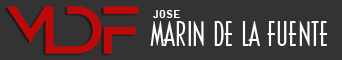
<style>
.page{position:relative;width:342px;height:60px;background:#333333}
.page>*{position:absolute;margin:0}
.t1{font:11.1px "BellGothicBT-Black";color:#ffffff}
.t2{font:33.2px "Cassandra-Regular";color:#ffffff}
</style>
<div class="page">
<p class="t1" style="left:153px;top:10px;width:27px;height:8px">JOSE</p>
<p class="t2" style="left:150px;top:21px;width:178px;height:25px">MARIN DE LA FUENTE</p>
</div>
